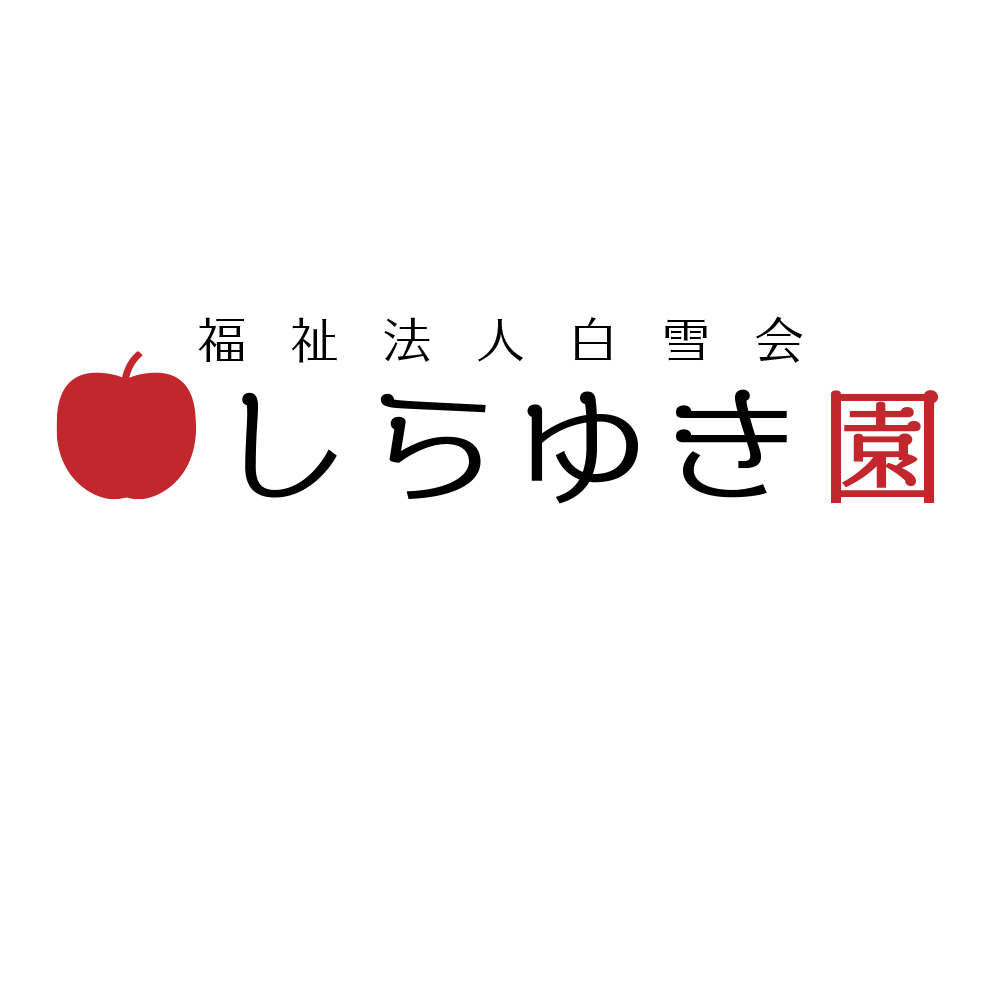
<style>
.page{position:relative;width:1000px;height:1000px;background:#ffffff}
.page>*{position:absolute;margin:0}
.t1{font:50px "Kan48TyposStd-Regular";letter-spacing:0.86em;color:#000000}
.t2{font:127px "VDL-ADMin-Regular";letter-spacing:0.18em;color:#000000}
</style>
<div class="page">
<p class="t1" style="left:198px;top:316px;width:605px;height:47px">福祉法人白雪会</p>
<p class="t2" style="left:242px;top:389px;width:697px;height:115px">しらゆき園</p>
</div>
